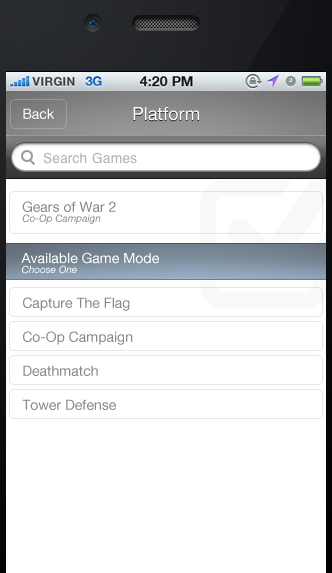
<style>
.page{position:relative;width:332px;height:573px;background:#ffffff}
.page>*{position:absolute;margin:0}
.t1{font:14px "HelveticaNeue";color:#ffffff}
.t2{font:18px "HelveticaNeue";color:#ffffff}
.t3{font:14px "HelveticaNeue";color:#888888}
.t4{font:10px "HelveticaNeue-Italic";color:#888888}
.t5{font:10px "HelveticaNeue-Italic";color:#ffffff}
</style>
<div class="page">
<p class="t1" style="left:23px;top:108px;width:31px;height:11px">Back</p>
<p class="t2" style="left:133px;top:107px;width:66px;height:14px">Platform</p>
<p class="t3" style="left:22px;top:201px;width:94px;height:11px">Gears of War 2</p>
<p class="t4" style="left:22px;top:214px;width:79px;height:10px">Co-Op Campaign</p>
<p class="t1" style="left:21px;top:252px;width:138px;height:12px">Available Game Mode</p>
<p class="t5" style="left:22px;top:265px;width:55px;height:9px">Choose One</p>
<p class="t3" style="left:23px;top:297px;width:107px;height:14px">Capture The Flag</p>
<p class="t3" style="left:23px;top:331px;width:110px;height:14px">Co-Op Campaign</p>
<p class="t3" style="left:23px;top:365px;width:75px;height:11px">Deathmatch</p>
<p class="t3" style="left:22px;top:399px;width:94px;height:11px">Tower Defense</p>
</div>
